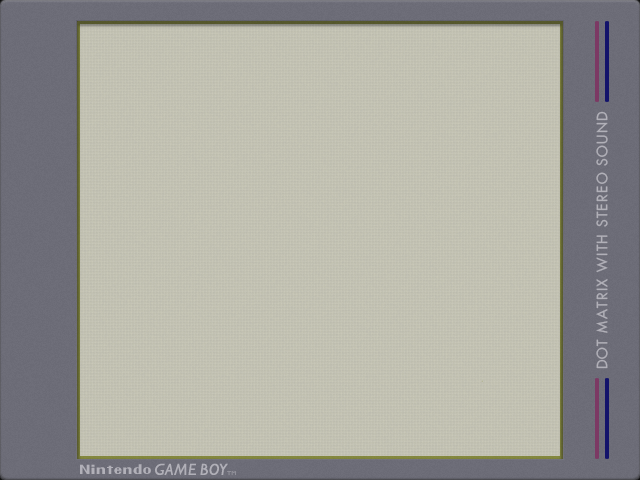
<style>
.page{position:relative;width:640px;height:480px}
.page>*{position:absolute;margin:0}
.t1{font:14px "Futura";letter-spacing:0.1em;color:#b1b0b8}
.t2{font:12px "Pretendo";letter-spacing:0.1em;color:#b1b0b8}
.t3{font:16px "GillSansMT-Italic";letter-spacing:0.05em;color:#b1b0b8}
.t4{font:6px "GillSansMT";letter-spacing:0.1em;color:#92919b}
</style>
<div class="page">
<p class="t1" style="left:596px;top:111px;width:12px;height:258px;rotate:-90deg">DOT MATRIX WITH STEREO SOUND</p>
<p class="t2" style="left:80px;top:464px;width:71px;height:10px">Nintendo</p>
<p class="t3" style="left:155px;top:463px;width:73px;height:12px">GAME BOY</p>
<p class="t4" style="left:227px;top:471px;width:9px;height:4px">TM</p>
</div>
